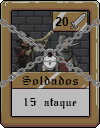
<style>
.page{position:relative;width:100px;height:128px;background:#886c41}
.page>*{position:absolute;margin:0}
.t1{font:12px "Arial-BoldMT";color:#000000}
.t2{font:12px "SWGothe";color:#000000}
.t3{font:10px "SWGothe";color:#000000}
</style>
<div class="page">
<p class="t1" style="left:55px;top:17px;width:14px;height:9px">20</p>
<p class="t2" style="left:22px;top:76px;width:57px;height:9px">Soldados</p>
<p class="t3" style="left:24px;top:98px;width:53px;height:11px">15 ataque</p>
</div>
